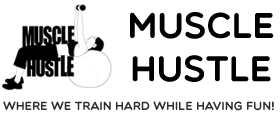
<style>
.page{position:relative;width:280px;height:120px;background:#ffffff}
.page>*{position:absolute;margin:0}
.t1{font:36px "Multicolore";color:#010000}
.t2{font:12px "Multicolore";color:#2f2e2e}
</style>
<div class="page">
<p class="t1" style="left:130px;top:12px;width:144px;height:70px;text-align:center">MUSCLE<br>HUSTLE</p>
<p class="t2" style="left:3px;top:101px;width:271px;height:10px">Where we train hard while having fun!</p>
</div>
